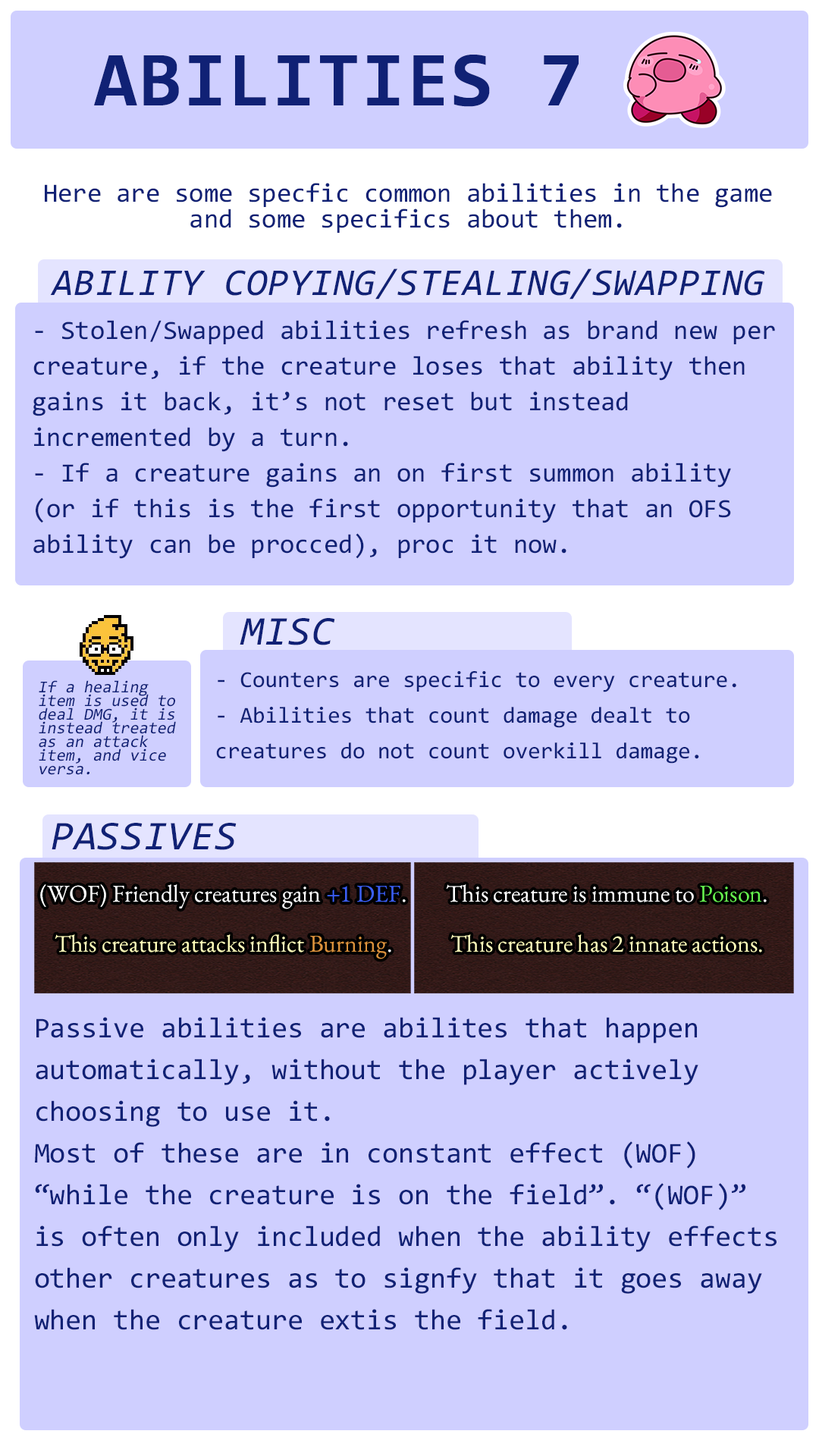
<style>
.page{position:relative;width:819px;height:1456px;background:#cfcfff}
.page>*{position:absolute;margin:0}
.t1{font:78.3px "Consolas-Bold";letter-spacing:0.02em;color:#102175}
.t2{font:26.5px/25.8px "Consolas";color:#102175}
.t3{font:37.9px "Consolas-Italic";letter-spacing:0.02em;color:#102175;text-transform:uppercase}
.t4{font:26.5px/35.6px "Consolas";color:#102175}
.t5{font:41.1px "Consolas-Italic";letter-spacing:0.02em;color:#102175}
.t6{font:22.7px/35.6px "Consolas";color:#102175}
.t7{font:16.7px/13.6px "Consolas";color:#102175;font-style:italic}
.t8{font:24.3px/50px "EBGaramond-Regular";color:#ffffff}
.t9{font:24.3px/50px "EBGaramond-Regular";color:#3c5ff4}
.t10{font:24.3px/50px "EBGaramond-Regular";color:#fffdba}
.t11{font:24.3px/50px "EBGaramond-Regular";color:#db923d}
.t12{font:24.3px/50px "EBGaramond-Regular";color:#66f24f}
.t13{font:28.8px/41.7px "Consolas";color:#102175}
</style>
<div class="page">
<p class="t1" style="left:94px;top:55px;width:485px;height:52px">ABILITIES 7</p>
<p class="t2" style="left:45px;top:183px;width:727px;height:50px;text-align:center">Here are some specfic common abilities in the game and some specifics about them.</p>
<p class="t3" style="left:50px;top:268px;width:715px;height:32px">Ability Copying/Stealing/Swapping</p>
<p class="t4" style="left:33px;top:320px;width:742px;height:239px">- Stolen/Swapped abilities refresh as brand new per creature, if the creature loses that ability then gains it back, it’s not reset but instead incremented by a turn.<br>- If a creature gains an on first summon ability (or if this is the first opportunity that an OFS ability can be procced), proc it now.</p>
<p class="t5" style="left:240px;top:618px;width:95px;height:27px">MISC</p>
<p class="t6" style="left:216px;top:671px;width:520px;height:93px">- Counters are specific to every creature.<br>- Abilities that count damage dealt to creatures do not count overkill damage.</p>
<p class="t7" style="left:39px;top:680px;width:137px;height:95px">If a healing item is used to deal DMG, it is instead treated as an attack item, and vice versa.</p>
<p class="t5" style="left:52px;top:823px;width:185px;height:27px">PASSIVES</p>
<p class="t8" style="left:40px;top:884px;width:366px;height:75px;text-align:center">(WOF) Friendly creatures gain <span class="t9">+1 DEF</span>.<br><span class="t10">This creature attacks inflict </span><span class="t11">Burning</span>.</p>
<p class="t10" style="left:446px;top:884px;width:321px;height:68px;text-align:center"><span class="t8">This creature is immune to </span><span class="t12">Poison</span><span class="t8">.<br></span>This creature has 2 innate actions.</p>
<p class="t13" style="left:34px;top:1017px;width:743px;height:313px">Passive abilities are abilites that happen automatically, without the player actively choosing to use it.<br>Most of these are in constant effect (WOF) “while the creature is on the field”. “(WOF)” is often only included when the ability effects other creatures as to signfy that it goes away when the creature extis the field.</p>
</div>
